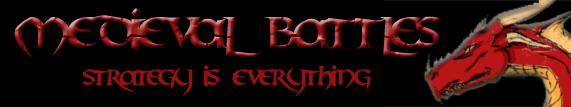
<style>
.page{position:relative;width:571px;height:107px;background:#000000}
.page>*{position:absolute;margin:0}
.t1{font:48px "Mael"}
.t2{font:24px "Mael";color:#931111}
</style>
<div class="page">
<p class="t1" style="left:14px;top:8px;width:426px;height:50px">Medieval Battles</p>
<p class="t2" style="left:82px;top:65px;width:289px;height:32px">strategy is everything</p>
</div>
